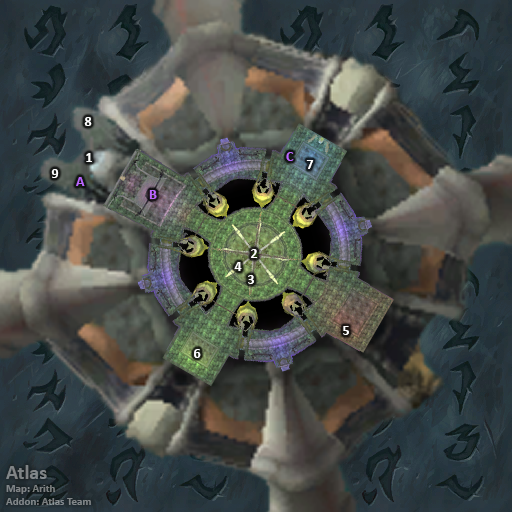
<style>
.page{position:relative;width:512px;height:512px}
.page>*{position:absolute;margin:0}
.t1{font:14px "Calibri-Bold";color:#ffffff}
.t2{font:14px "Calibri-Bold";color:#bb66ff}
.t3{font:11px "Calibri-Bold";color:#808486}
.t4{font:20px "Calibri-Bold";color:#808486}
</style>
<div class="page">
<p class="t1" style="left:84px;top:117px;width:8px;height:9px">8</p>
<p class="t1" style="left:86px;top:153px;width:6px;height:9px">1</p>
<p class="t2" style="left:286px;top:152px;width:8px;height:9px">C</p>
<p class="t1" style="left:306px;top:160px;width:8px;height:9px">7</p>
<p class="t1" style="left:51px;top:169px;width:8px;height:9px">9</p>
<p class="t2" style="left:76px;top:177px;width:9px;height:9px">A</p>
<p class="t2" style="left:149px;top:190px;width:8px;height:9px">B</p>
<p class="t1" style="left:251px;top:249px;width:7px;height:9px">2</p>
<p class="t1" style="left:234px;top:262px;width:8px;height:9px">4</p>
<p class="t1" style="left:248px;top:275px;width:6px;height:9px">3</p>
<p class="t1" style="left:343px;top:326px;width:6px;height:9px">5</p>
<p class="t1" style="left:194px;top:349px;width:7px;height:9px">6</p>
<p class="t3" style="left:6px;top:465px;width:85px;height:40px"><span class="t4">Atlas<br></span>Map: Arith<br>Addon: Atlas Team</p>
</div>
